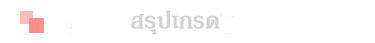
<style>
.page{position:relative;width:375px;height:43px;background:#ffffff}
.page>*{position:absolute;margin:0}
.t1{font:30px "DSEMaiThai";color:#d4d1d1;font-weight:bold}
</style>
<div class="page">
<p class="t1" style="left:131px;top:10px;width:89px;height:25px">ÊÃØ»à¡Ã´</p>
</div>
